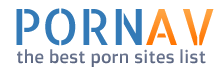
<style>
.page{position:relative;width:217px;height:67px;background:#ffffff}
.page>*{position:absolute;margin:0}
.t1{font:50px "AllertaStencil-Regular";color:#337ab7}
.t2{font:50px "AllertaStencil-Regular"}
.t3{font:18px "DoppioOne-Regular";color:#636e88}
</style>
<div class="page">
<p class="t1" style="left:16px;top:8px;width:126px;height:38px">PORN</p>
<p class="t2" style="left:146px;top:9px;width:68px;height:37px">AV</p>
<p class="t3" style="left:17px;top:49px;width:189px;height:18px">the best porn sites list</p>
</div>
